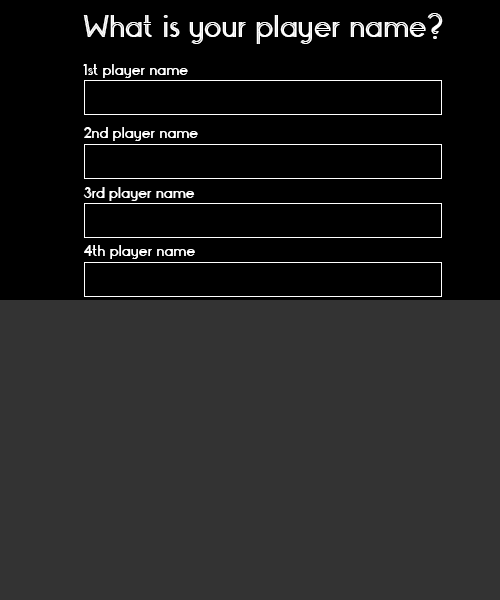
<style>
.page{position:relative;width:500px;height:600px;background:#333333}
.page>*{position:absolute;margin:0}
.t1{font:36px "Monopoly-Inline";color:#ffffff}
.t2{font:18px "Monopoly-Inline";color:#ffffff}
</style>
<div class="page">
<p class="t1" style="left:83px;top:13px;width:360px;height:31px">What is your player name?</p>
<p class="t2" style="left:83px;top:64px;width:105px;height:14px">1st player name</p>
<p class="t2" style="left:84px;top:127px;width:114px;height:14px">2nd player name</p>
<p class="t2" style="left:83px;top:187px;width:112px;height:14px">3rd player name</p>
<p class="t2" style="left:84px;top:245px;width:111px;height:14px">4th player name</p>
</div>
